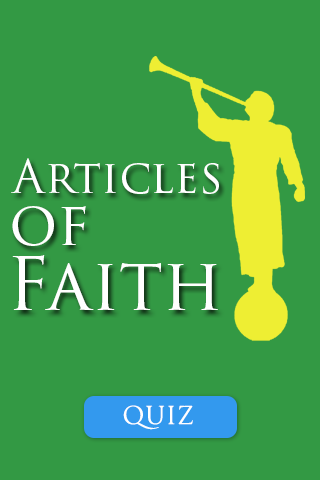
<style>
.page{position:relative;width:320px;height:480px;background:#339944}
.page>*{position:absolute;margin:0}
.t1{font:45.6px "TrajanPro3-Regular";color:#ffffff}
.t2{font:60px "TrajanPro3-Regular";color:#ffffff}
.t3{font:72px "TrajanPro3-Regular";color:#ffffff}
.t4{font:24px "TrajanPro3-Regular";letter-spacing:0.025em;color:#ffffff}
</style>
<div class="page">
<p class="t1" style="left:11px;top:158px;width:208px;height:36px">Articles</p>
<p class="t2" style="left:12px;top:206px;width:74px;height:40px">of</p>
<p class="t3" style="left:12px;top:255px;width:206px;height:55px">Faith</p>
<p class="t4" style="left:123px;top:405px;width:70px;height:25px">QUIZ</p>
</div>
